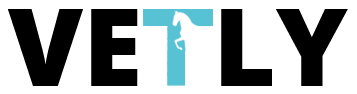
<style>
.page{position:relative;width:357px;height:94px;background:#ffffff}
.page>*{position:absolute;margin:0}
.t1{font:108px "OpenSans-Extrabold";color:#000000}
</style>
<div class="page">
<p class="t1" style="left:8px;top:9px;width:130px;height:77px">VE</p>
<p class="t1" style="left:221px;top:9px;width:127px;height:77px">LY</p>
</div>
